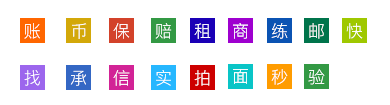
<style>
.page{position:relative;width:390px;height:105px;background:#ffffff}
.page>*{position:absolute;margin:0}
.t1{font:17px "PingFang-SC-Regular";letter-spacing:0.05em;color:#ffffff}
</style>
<div class="page">
<p class="t1" style="left:24px;top:23px;width:16px;height:16px">账</p>
<p class="t1" style="left:72px;top:23px;width:15px;height:16px">币</p>
<p class="t1" style="left:113px;top:23px;width:17px;height:16px">保</p>
<p class="t1" style="left:155px;top:23px;width:17px;height:16px">赔</p>
<p class="t1" style="left:194px;top:23px;width:17px;height:16px">租</p>
<p class="t1" style="left:233px;top:23px;width:15px;height:16px">商</p>
<p class="t1" style="left:271px;top:23px;width:17px;height:16px">练</p>
<p class="t1" style="left:309px;top:23px;width:15px;height:16px">邮</p>
<p class="t1" style="left:346px;top:23px;width:17px;height:16px">快</p>
<p class="t1" style="left:24px;top:70px;width:16px;height:16px">找</p>
<p class="t1" style="left:70px;top:70px;width:16px;height:16px">承</p>
<p class="t1" style="left:113px;top:70px;width:17px;height:16px">信</p>
<p class="t1" style="left:156px;top:70px;width:15px;height:16px">实</p>
<p class="t1" style="left:194px;top:70px;width:16px;height:16px">拍</p>
<p class="t1" style="left:233px;top:69px;width:15px;height:15px">面</p>
<p class="t1" style="left:271px;top:69px;width:17px;height:16px">秒</p>
<p class="t1" style="left:308px;top:69px;width:17px;height:16px">验</p>
</div>
